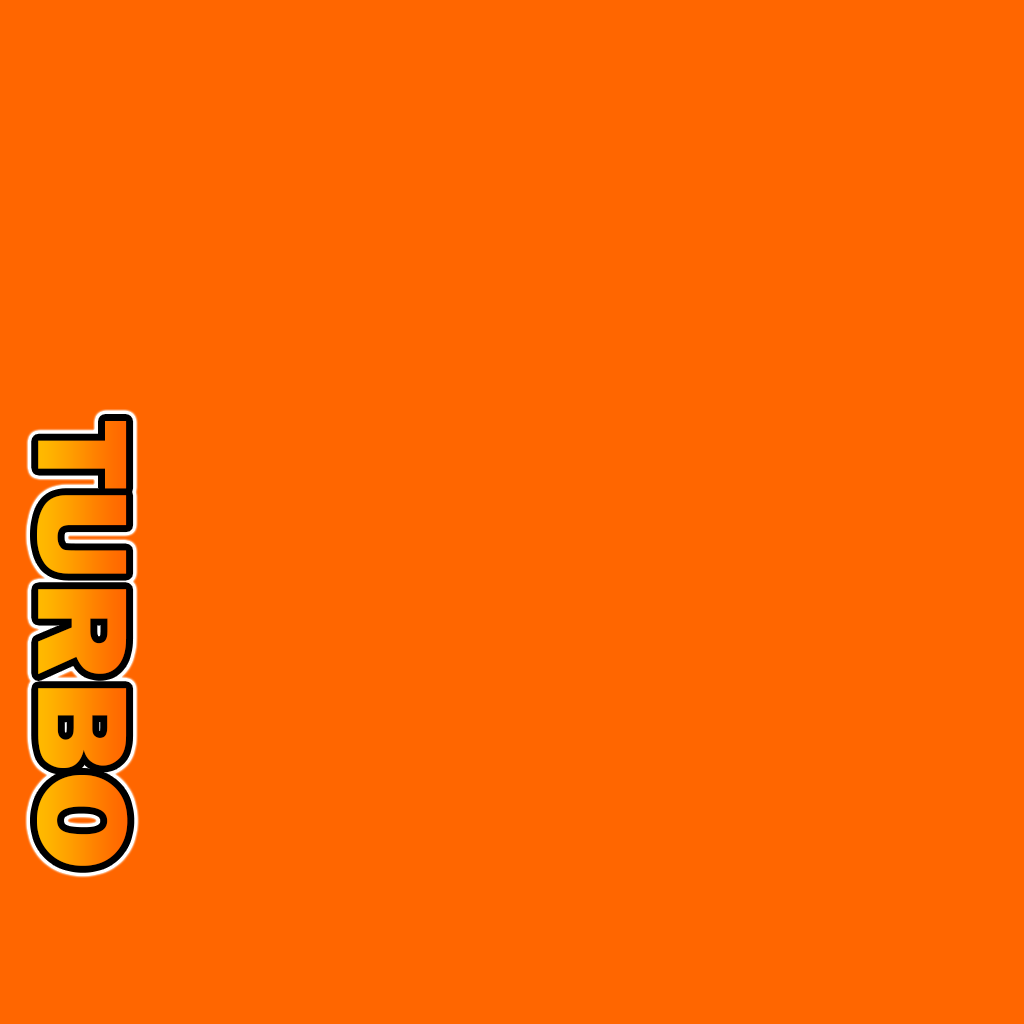
<style>
.page{position:relative;width:1024px;height:1024px;background:#ff6600}
.page>*{position:absolute;margin:0}
.t1{font:131.6px "FranklinGothic-Heavy";font-variant:small-caps;scale:1.09 1}
</style>
<div class="page">
<p class="t1" style="left:37px;top:421px;width:91px;height:445px;rotate:90deg">TURBO</p>
</div>
